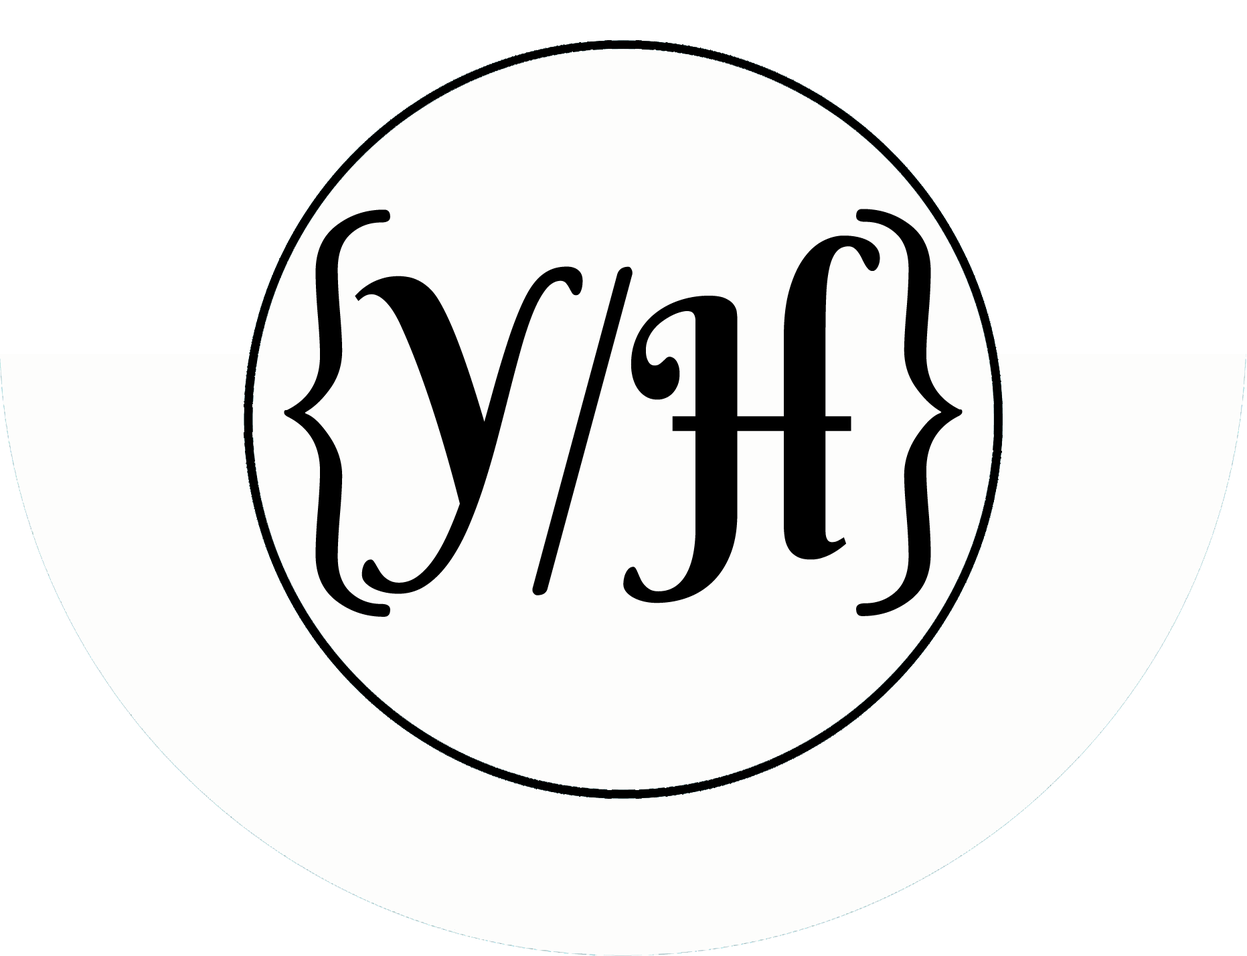
<style>
.page{position:relative;width:1247px;height:956px;background:#fdfdfc}
.page>*{position:absolute;margin:0}
.t1{font:468.5px "EBGaramond12-AllSC";color:#000000;scale:0.72 1}
.t2{font:339.2px "BerkshireSwash-Regular";color:#000000;scale:0.77 1}
.t3{font:320px "BerkshireSwash-Regular";color:#000000;scale:0.85 1}
.t4{font:451.7px "EBGaramond12-AllSC";color:#000000;scale:0.63 1}
</style>
<div class="page">
<p class="t1" style="left:284px;top:209px;width:106px;height:408px">{</p>
<p class="t1" style="left:856px;top:209px;width:106px;height:407px;rotate:180deg">{</p>
<p class="t2" style="left:623px;top:236px;width:257px;height:368px">H</p>
<p class="t3" style="left:355px;top:266px;width:228px;height:328px">Y</p>
<p class="t4" style="left:532px;top:266px;width:100px;height:330px">/</p>
</div>
